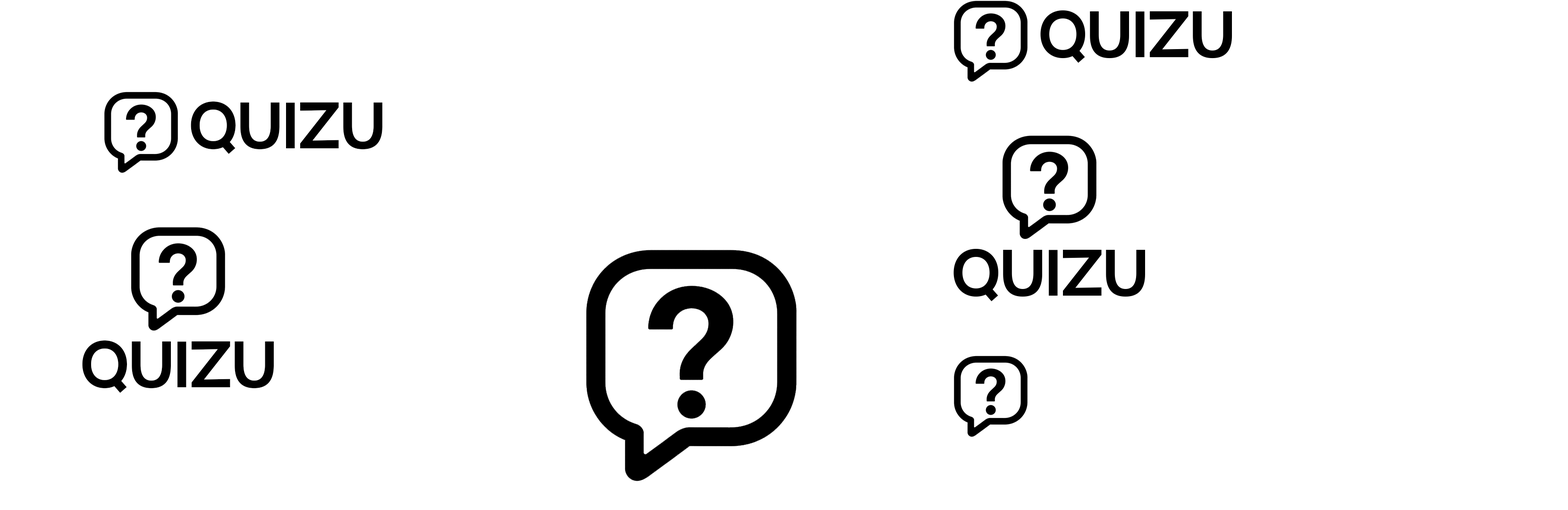
<style>
.page{position:relative;width:1568px;height:510px;background:#ffffff}
.page>*{position:absolute;margin:0}
.t1{font:70.8px "FONTSPRINGDEMO-HalcyonSemiBoldRegular";letter-spacing:-0.06em;color:#000000}
</style>
<div class="page">
<p class="t1" style="left:1040px;top:10px;width:192px;height:53px">QUIZU</p>
<p class="t1" style="left:191px;top:101px;width:191px;height:53px">QUIZU</p>
<p class="t1" style="left:953px;top:249px;width:192px;height:52px">QUIZU</p>
<p class="t1" style="left:82px;top:340px;width:192px;height:53px">QUIZU</p>
</div>
